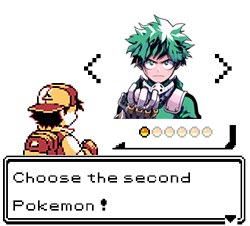
<style>
.page{position:relative;width:250px;height:226px;background:#ffffff}
.page>*{position:absolute;margin:0}
.t1{font:33.3px "Pokemon-Classic";color:#000000}
.t2{font:11.7px "Pokemon-Classic";color:#000000}
</style>
<div class="page">
<p class="t1" style="left:84px;top:54px;width:17px;height:30px">&lt;</p>
<p class="t1" style="left:215px;top:54px;width:17px;height:30px">&gt;</p>
<p class="t2" style="left:13px;top:172px;width:177px;height:39px">Choose the second <br><br>Pokemon !</p>
</div>
